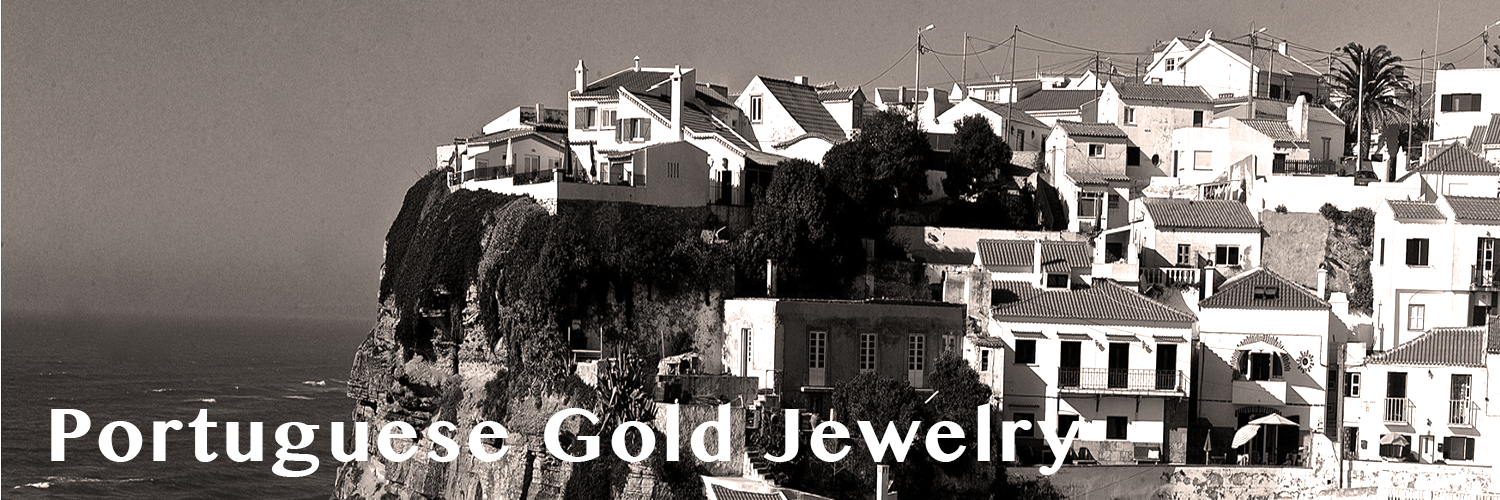
<style>
.page{position:relative;width:1500px;height:500px}
.page>*{position:absolute;margin:0}
.t1{font:75px "GurmukhiMN-Bold";letter-spacing:0.05em;color:#ffffff}
</style>
<div class="page">
<p class="t1" style="left:51px;top:403px;width:1031px;height:74px">Portuguese Gold Jewelry</p>
</div>
